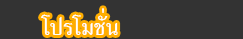
<style>
.page{position:relative;width:243px;height:39px;background:#333333}
.page>*{position:absolute;margin:0}
.t1{font:30px "EucrosiaUPC";color:#ffffff}
.t2{font:27px "EucrosiaUPC";color:#ffffff;scale:0.93 1}
</style>
<div class="page">
<p class="t1" style="left:41px;top:14px;width:77px;height:21px">โปรโมชัน</p>
<p class="t2" style="left:102px;top:8px;width:2px;height:5px">่</p>
</div>
